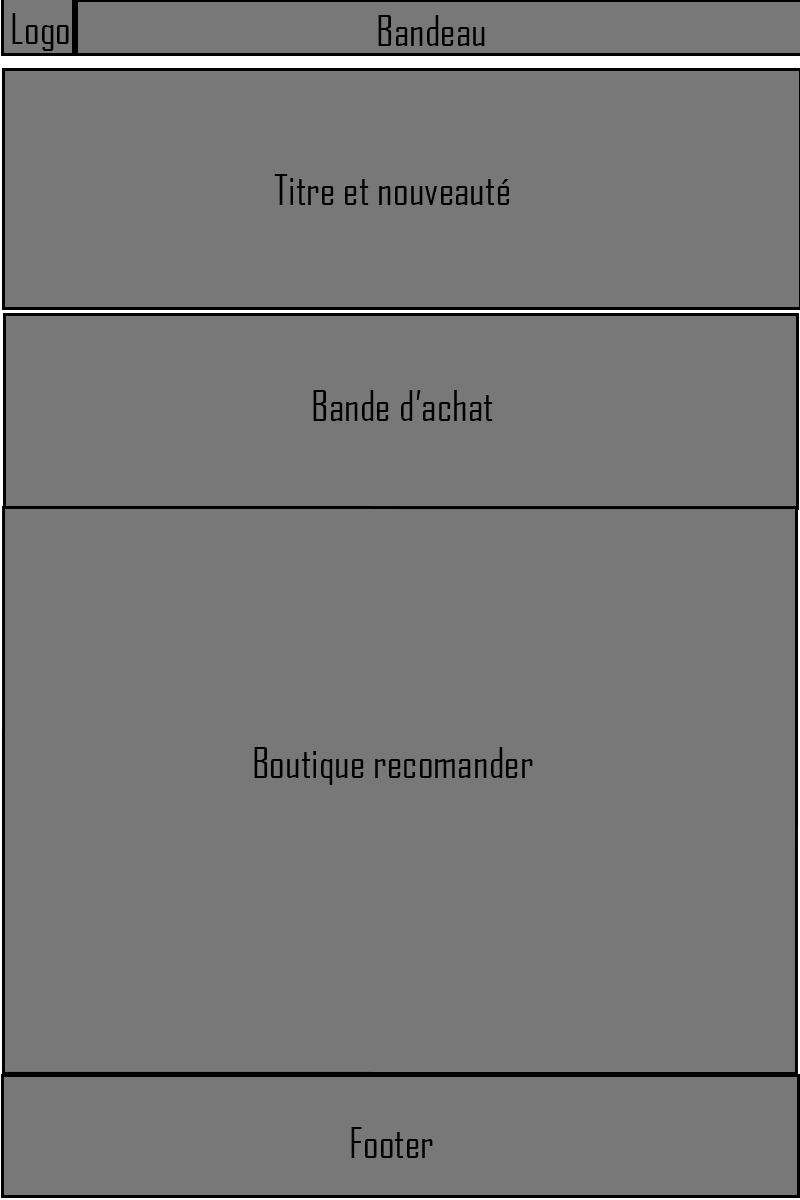
<style>
.page{position:relative;width:800px;height:1200px;background:#787878}
.page>*{position:absolute;margin:0}
.t1{font:41.3px "AgencyFB-Reg";color:#000000}
</style>
<div class="page">
<p class="t1" style="left:12px;top:13px;width:57px;height:38px">Logo</p>
<p class="t1" style="left:378px;top:15px;width:107px;height:31px">Bandeau</p>
<p class="t1" style="left:274px;top:174px;width:236px;height:31px">Titre et nouveauté</p>
<p class="t1" style="left:313px;top:390px;width:180px;height:31px">Bande d’achat</p>
<p class="t1" style="left:254px;top:747px;width:279px;height:38px">Boutique recomander</p>
<p class="t1" style="left:351px;top:1127px;width:82px;height:31px">Footer</p>
</div>
